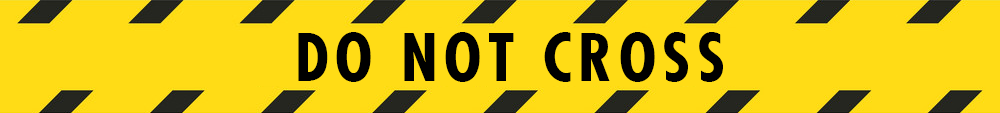
<style>
.page{position:relative;width:1000px;height:113px;background:#ffdc16}
.page>*{position:absolute;margin:0}
.t1{font:64px "FuturaLT-CondensedBold";letter-spacing:0.1em;color:#000000}
</style>
<div class="page">
<p class="t1" style="left:298px;top:32px;width:425px;height:50px">DO NOT CROSS</p>
</div>
